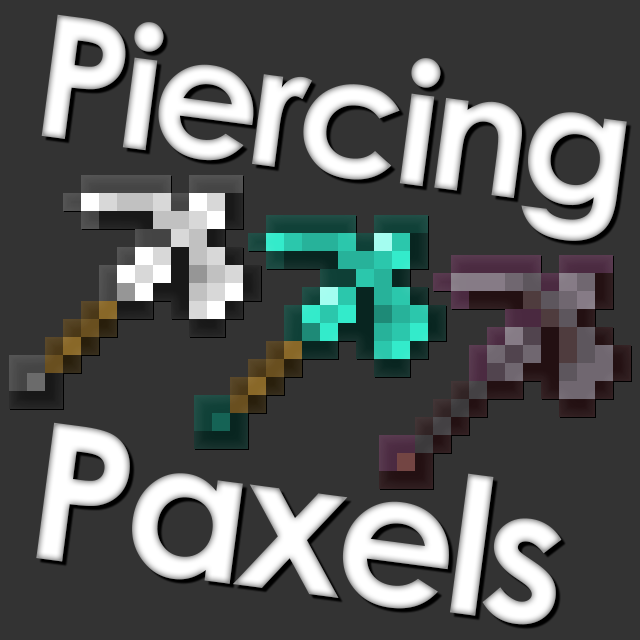
<style>
.page{position:relative;width:640px;height:640px;background:#333333}
.page>*{position:absolute;margin:0}
.t1{font:170px "CenturyGothic-Bold";letter-spacing:-0.05em;color:#ffffff}
.t2{font:190px "CenturyGothic-Bold";letter-spacing:-0.05em;color:#ffffff}
</style>
<div class="page">
<p class="t1" style="left:41px;top:14px;width:586px;height:227px;rotate:8deg">Piercing</p>
<p class="t2" style="left:36px;top:422px;width:526px;height:203px;rotate:8deg">Paxels</p>
</div>
